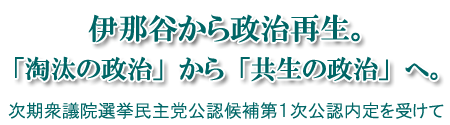
<style>
.page{position:relative;width:450px;height:125px;background:#ffffff}
.page>*{position:absolute;margin:0}
.t1{font:30px "HGPMinchoE";color:#006666}
.t2{font:26px "HGPMinchoE";color:#006666}
.t3{font:18px "HGPGothicM";color:#006666}
</style>
<div class="page">
<p class="t1" style="left:88px;top:14px;width:272px;height:29px">伊那谷から政治再生。</p>
<p class="t2" style="left:15px;top:56px;width:423px;height:26px">「淘汰の政治」から「共生の政治」へ。</p>
<p class="t3" style="left:8px;top:102px;width:436px;height:17px">次期衆議院選挙民主党公認候補第１次公認内定を受けて</p>
</div>
